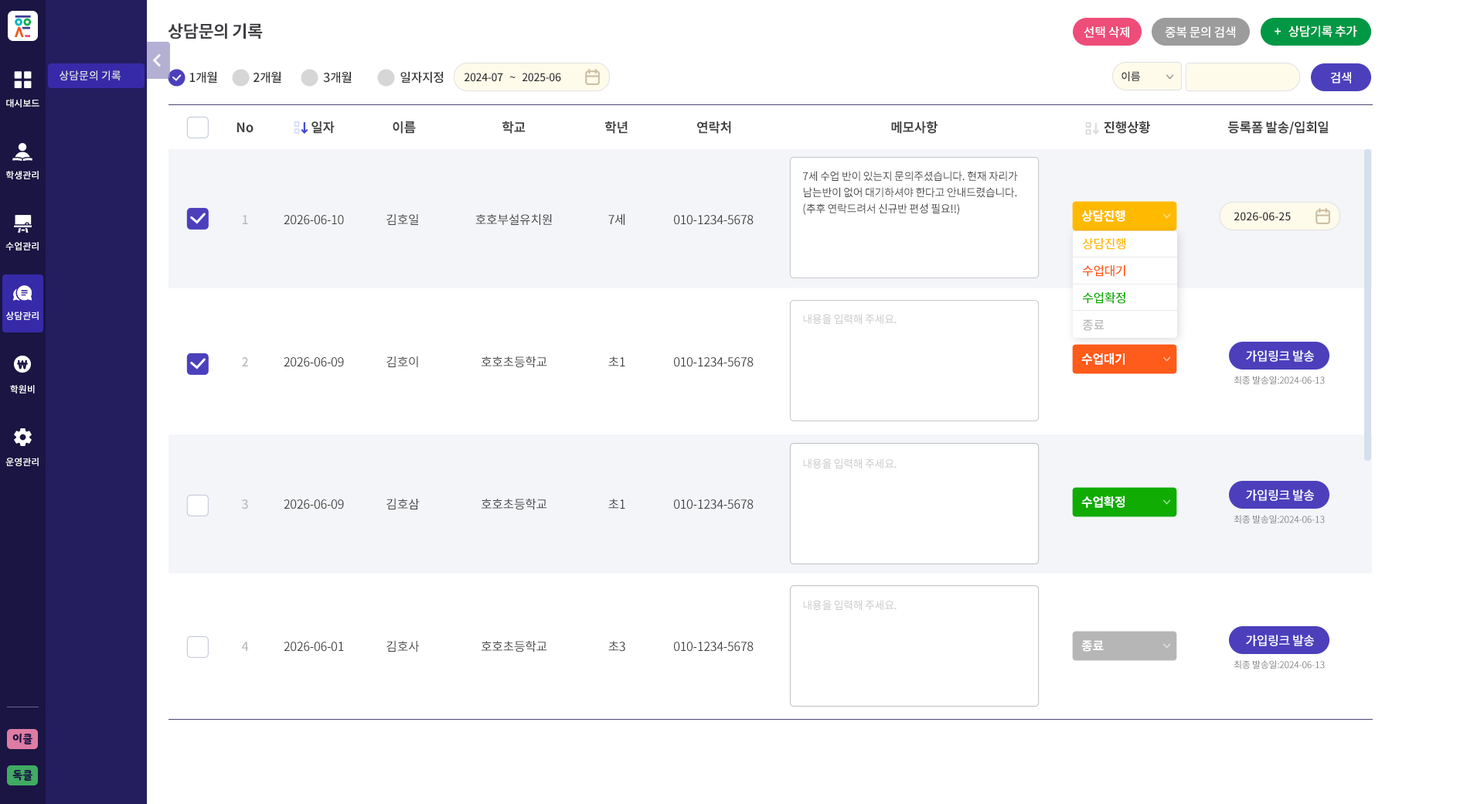
<style>
.page{position:relative;width:1484px;height:804px;background:#ffffff}
.page>*{position:absolute;margin:0}
.t1{font:17px "NotoSansCJKkr-Bold";letter-spacing:-0.025em;color:#3e3e43}
.t2{font:12.4px "NotoSansCJKkr-Medium";letter-spacing:-0.025em;color:#ffffff}
.t3{font:10.8px "NotoSansCJKkr-Medium";color:#e1e1e1}
.t4{font:12.4px "NotoSansCJKkr-Medium";letter-spacing:-0.025em;color:#323232}
.t5{font:10.8px "NotoSansCJKkr-Medium";letter-spacing:-0.025em;color:#323232}
.t6{font:9.3px "NotoSansCJKkr-Medium";color:#ffffff}
.t7{font:13.1px "NotoSansCJKkr-Bold";letter-spacing:-0.025em;color:#404040}
.t8{font:10.8px/16.2px "NotoSansCJKkr-Regular";letter-spacing:-0.025em;color:#404040}
.t9{font:12.4px "NotoSansCJKkr-Bold";letter-spacing:-0.025em;color:#ffffff}
.t10{font:12.4px/142.2px "NotoSansCJKkr-Medium";letter-spacing:-0.025em;color:#a8a8a8}
.t11{font:12.4px/142.2px "NotoSansCJKkr-Regular";letter-spacing:-0.025em;color:#404040}
.t12{font:10.8px "NotoSansCJKkr-Medium";color:#323232}
.t13{font:12.4px/27px "NotoSansCJKkr-Medium";letter-spacing:-0.025em;color:#ffba00}
.t14{font:12.4px/27px "NotoSansCJKkr-Medium";letter-spacing:-0.025em;color:#ff5b1a}
.t15{font:12.4px/27px "NotoSansCJKkr-Medium";letter-spacing:-0.025em;color:#10ac04}
.t16{font:12.4px/27px "NotoSansCJKkr-Medium";letter-spacing:-0.025em;color:#b6b6b6}
.t17{font:10.8px "NotoSansCJKkr-Regular";letter-spacing:-0.025em;color:#c8c8c8}
.t18{font:9.3px "NotoSansCJKkr-Regular";letter-spacing:-0.025em;color:#848484}
.t19{font:10.8px "YoonSoftSlime";color:#1a1543}
</style>
<div class="page">
<p class="t1" style="left:168px;top:23px;width:95px;height:16px">상담문의 기록</p>
<p class="t2" style="left:1083px;top:26px;width:46px;height:12px">선택 삭제</p>
<p class="t2" style="left:1165px;top:26px;width:70px;height:12px">중복 문의 검색</p>
<p class="t2" style="left:1274px;top:26px;width:83px;height:11px">상담기록 추가</p>
<p class="t3" style="left:60px;top:70px;width:61px;height:10px">상담문의 기록</p>
<p class="t4" style="left:189px;top:71px;width:28px;height:12px">1개월</p>
<p class="t4" style="left:253px;top:71px;width:28px;height:12px">2개월</p>
<p class="t4" style="left:323px;top:71px;width:29px;height:12px">3개월</p>
<p class="t4" style="left:400px;top:71px;width:44px;height:12px">일자지정</p>
<p class="t5" style="left:464px;top:73px;width:97px;height:9px">2024-07   ~   2025-06</p>
<p class="t5" style="left:1121px;top:71px;width:19px;height:10px">이름</p>
<p class="t2" style="left:1330px;top:72px;width:21px;height:11px">검색</p>
<p class="t6" style="left:6px;top:99px;width:33px;height:8px">대시보드</p>
<p class="t7" style="left:236px;top:122px;width:17px;height:11px">No</p>
<p class="t7" style="left:311px;top:121px;width:24px;height:13px">일자</p>
<p class="t7" style="left:393px;top:121px;width:23px;height:13px">이름</p>
<p class="t7" style="left:502px;top:121px;width:23px;height:13px">학교</p>
<p class="t7" style="left:605px;top:121px;width:22px;height:13px">학년</p>
<p class="t7" style="left:697px;top:121px;width:34px;height:13px">연락처</p>
<p class="t7" style="left:891px;top:121px;width:46px;height:13px">메모사항</p>
<p class="t7" style="left:1104px;top:121px;width:46px;height:13px">진행상황</p>
<p class="t7" style="left:1228px;top:121px;width:100px;height:13px">등록폼 발송/입회일</p>
<p class="t6" style="left:6px;top:171px;width:33px;height:8px">학생관리</p>
<p class="t8" style="left:803px;top:171px;width:215px;height:44px">7세 수업 반이 있는지 문의주셨습니다. 현재 자리가<br>남는반이 없어 대기하셔야 한다고 안내드렸습니다.<br>(추후 연락드려서 신규반 편성 필요!!)</p>
<p class="t9" style="left:1081px;top:209px;width:44px;height:13px">상담진행</p>
<p class="t10" style="left:241px;top:215px;width:8px;height:436px;text-align:center;opacity:0.8">1<br>2<br>3<br>4</p>
<p class="t11" style="left:284px;top:215px;width:60px;height:436px;text-align:center">2026-06-10<br>2026-06-09<br>2026-06-09<br>2026-06-01</p>
<p class="t11" style="left:386px;top:213px;width:34px;height:439px">김호일<br>김호이<br>김호삼<br>김호사</p>
<p class="t11" style="left:475px;top:213px;width:77px;height:439px;text-align:center">호호부설유치원<br>호호초등학교<br>호호초등학교<br>호호초등학교</p>
<p class="t11" style="left:608px;top:213px;width:17px;height:438px;text-align:center">7세<br>초1<br>초1<br>초3</p>
<p class="t11" style="left:674px;top:215px;width:79px;height:436px;text-align:center">010-1234-5678<br>010-1234-5678<br>010-1234-5678<br>010-1234-5678</p>
<p class="t12" style="left:1233px;top:212px;width:58px;height:9px">2026-06-25</p>
<p class="t6" style="left:5px;top:242px;width:34px;height:8px">수업관리</p>
<p class="t13" style="left:1082px;top:238px;width:43px;height:93px">상담진행<br><span class="t14">수업대기<br></span><span class="t15">수업확정<br></span><span class="t16">종료</span></p>
<p class="t6" style="left:5px;top:311px;width:34px;height:9px">상담관리</p>
<p class="t17" style="left:803px;top:314px;width:93px;height:11px">내용을 입력해 주세요.</p>
<p class="t9" style="left:1081px;top:352px;width:43px;height:13px">수업대기</p>
<p class="t2" style="left:1246px;top:350px;width:68px;height:12px">가입링크 발송</p>
<p class="t18" style="left:1233px;top:376px;width:92px;height:9px">최종 발송일:2024-06-13</p>
<p class="t6" style="left:10px;top:385px;width:25px;height:8px">학원비</p>
<p class="t6" style="left:5px;top:457px;width:34px;height:9px">운영관리</p>
<p class="t17" style="left:803px;top:458px;width:93px;height:11px">내용을 입력해 주세요.</p>
<p class="t9" style="left:1081px;top:495px;width:43px;height:13px">수업확정</p>
<p class="t2" style="left:1246px;top:489px;width:68px;height:12px">가입링크 발송</p>
<p class="t18" style="left:1233px;top:515px;width:92px;height:9px">최종 발송일:2024-06-13</p>
<p class="t17" style="left:803px;top:600px;width:93px;height:10px">내용을 입력해 주세요.</p>
<p class="t9" style="left:1081px;top:640px;width:23px;height:11px">종료</p>
<p class="t2" style="left:1246px;top:634px;width:68px;height:12px">가입링크 발송</p>
<p class="t18" style="left:1233px;top:660px;width:92px;height:9px">최종 발송일:2024-06-13</p>
<p class="t19" style="left:12px;top:733px;width:20px;height:11px">이클</p>
<p class="t19" style="left:12px;top:770px;width:20px;height:10px">독클</p>
</div>
